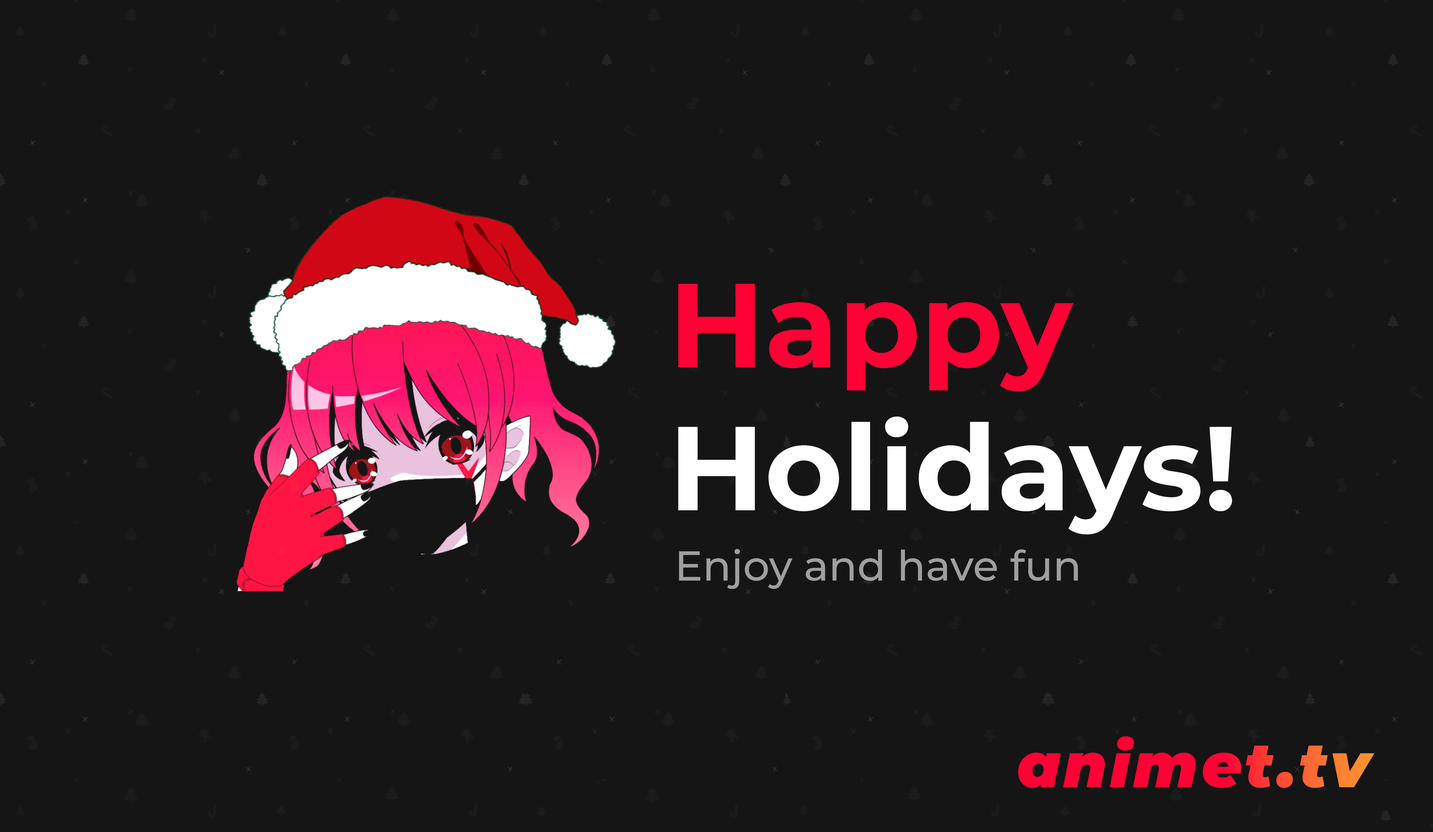
<style>
.page{position:relative;width:1433px;height:832px;background:#151515}
.page>*{position:absolute;margin:0}
.t1{font:119.3px "Montserrat-Bold";color:#ffffff}
.t2{font:119.3px "Montserrat-Bold";color:#fe0135}
.t3{font:41.8px "Montserrat-Medium";color:#9f9f9f}
</style>
<div class="page">
<p class="t1" style="left:678px;top:284px;width:554px;height:251px"><span class="t2">Happy<br></span>Holidays!</p>
<p class="t3" style="left:679px;top:549px;width:399px;height:40px">Enjoy and have fun</p>
</div>
